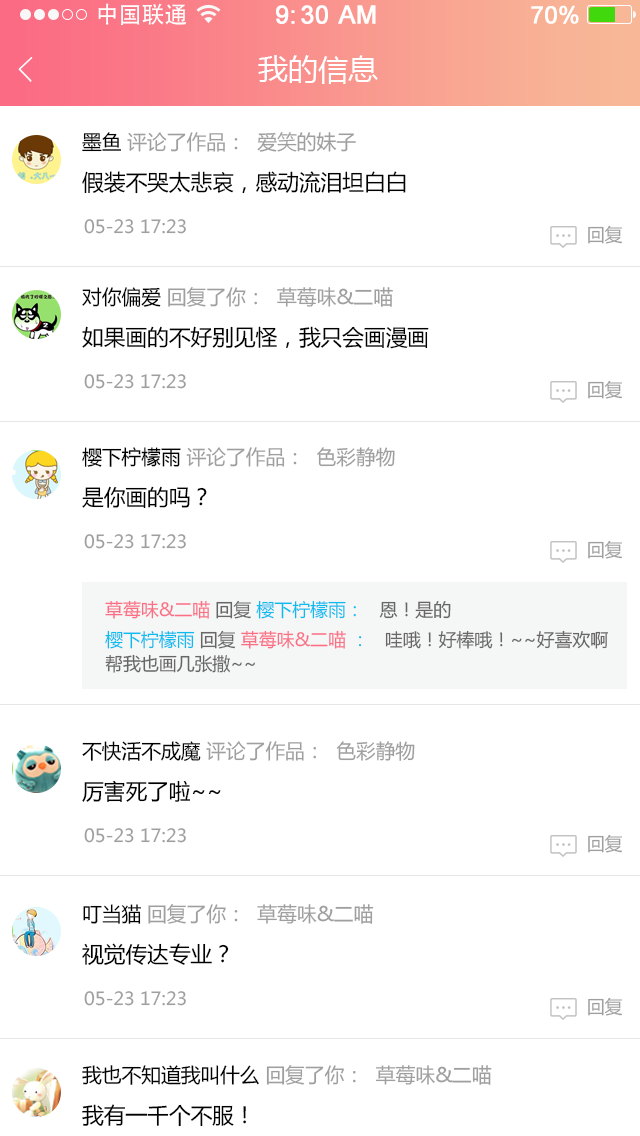
<style>
.page{position:relative;width:640px;height:1136px;background:#ffffff}
.page>*{position:absolute;margin:0}
.t1{font:23px "AdobeHeitiStd-Regular";color:#ffffff}
.t2{font:25px "ArialMT";color:#ffffff;font-weight:bold}
.t3{font:24px "ArialMT";color:#ffffff;font-weight:bold}
.t4{font:30px "MicrosoftYaHei";color:#ffffff}
.t5{font:20px "MicrosoftYaHei";color:#9f9f9f}
.t6{font:20px "MicrosoftYaHei";color:#000000}
.t7{font:22px "MicrosoftYaHei";color:#000000}
.t8{font:18px "MicrosoftYaHei";color:#9f9f9f}
.t9{font:18px "MicrosoftYaHei";color:#fb6f85}
.t10{font:18px "MicrosoftYaHei";color:#686666}
.t11{font:18px "MicrosoftYaHei";color:#0cbcef}
.t12{font:18px/24px "MicrosoftYaHei";color:#686666}
.t13{font:18px/24px "MicrosoftYaHei";color:#0cbcef}
.t14{font:18px/24px "MicrosoftYaHei";color:#fb6f85}
</style>
<div class="page">
<p class="t1" style="left:98px;top:3px;width:88px;height:22px">中国联通</p>
<p class="t2" style="left:276px;top:5px;width:100px;height:19px">9:30 AM</p>
<p class="t3" style="left:531px;top:5px;width:48px;height:19px">70%</p>
<p class="t4" style="left:258px;top:55px;width:120px;height:29px">我的信息</p>
<p class="t5" style="left:82px;top:132px;width:274px;height:20px"><span class="t6">墨鱼 </span>评论了作品：  爱笑的妹子</p>
<p class="t7" style="left:82px;top:171px;width:324px;height:23px">假装不哭太悲哀，感动流泪坦白白</p>
<p class="t8" style="left:84px;top:219px;width:102px;height:15px">05-23 17:23</p>
<p class="t8" style="left:588px;top:225px;width:35px;height:19px">回复</p>
<p class="t5" style="left:82px;top:287px;width:311px;height:20px"><span class="t6">对你偏爱 </span>回复了你：  草莓味&amp;二喵</p>
<p class="t7" style="left:82px;top:326px;width:347px;height:23px">如果画的不好别见怪，我只会画漫画</p>
<p class="t8" style="left:84px;top:374px;width:102px;height:15px">05-23 17:23</p>
<p class="t8" style="left:588px;top:380px;width:35px;height:19px">回复</p>
<p class="t5" style="left:82px;top:447px;width:313px;height:20px"><span class="t6">樱下柠檬雨 </span>评论了作品：  色彩静物</p>
<p class="t7" style="left:82px;top:486px;width:125px;height:23px">是你画的吗？</p>
<p class="t8" style="left:84px;top:534px;width:102px;height:15px">05-23 17:23</p>
<p class="t8" style="left:588px;top:540px;width:35px;height:19px">回复</p>
<p class="t9" style="left:105px;top:600px;width:346px;height:19px">草莓味&amp;二喵 <span class="t10">回复 </span><span class="t11">樱下柠檬雨：  </span><span class="t10"> 恩！是的</span></p>
<p class="t12" style="left:105px;top:630px;width:503px;height:43px"><span class="t13">樱下柠檬雨 </span>回复 <span class="t14">草莓味&amp;二喵 </span><span class="t13">：  </span> 哇哦！好棒哦！~~好喜欢啊<br>帮我也画几张撒~~</p>
<p class="t5" style="left:82px;top:741px;width:333px;height:20px"><span class="t6">不快活不成魔 </span>评论了作品：  色彩静物</p>
<p class="t7" style="left:82px;top:780px;width:139px;height:22px">厉害死了啦~~</p>
<p class="t8" style="left:84px;top:828px;width:102px;height:15px">05-23 17:23</p>
<p class="t8" style="left:588px;top:834px;width:35px;height:19px">回复</p>
<p class="t5" style="left:83px;top:904px;width:291px;height:20px"><span class="t6">叮当猫 </span>回复了你：  草莓味&amp;二喵</p>
<p class="t7" style="left:82px;top:943px;width:147px;height:22px">视觉传达专业？</p>
<p class="t8" style="left:84px;top:991px;width:102px;height:15px">05-23 17:23</p>
<p class="t8" style="left:588px;top:997px;width:35px;height:19px">回复</p>
<p class="t5" style="left:82px;top:1065px;width:410px;height:20px"><span class="t6">我也不知道我叫什么 </span>回复了你：  草莓味&amp;二喵</p>
<p class="t7" style="left:82px;top:1104px;width:164px;height:23px">我有一千个不服！</p>
</div>
